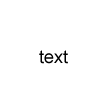
<style>
.page{position:relative;width:100px;height:100px;background:#ffffff}
.page>*{position:absolute;margin:0}
.t1{font:18px "ArialMT";color:#000000}
</style>
<div class="page">
<p class="t1" style="left:39px;top:50px;width:29px;height:14px">text</p>
</div>
